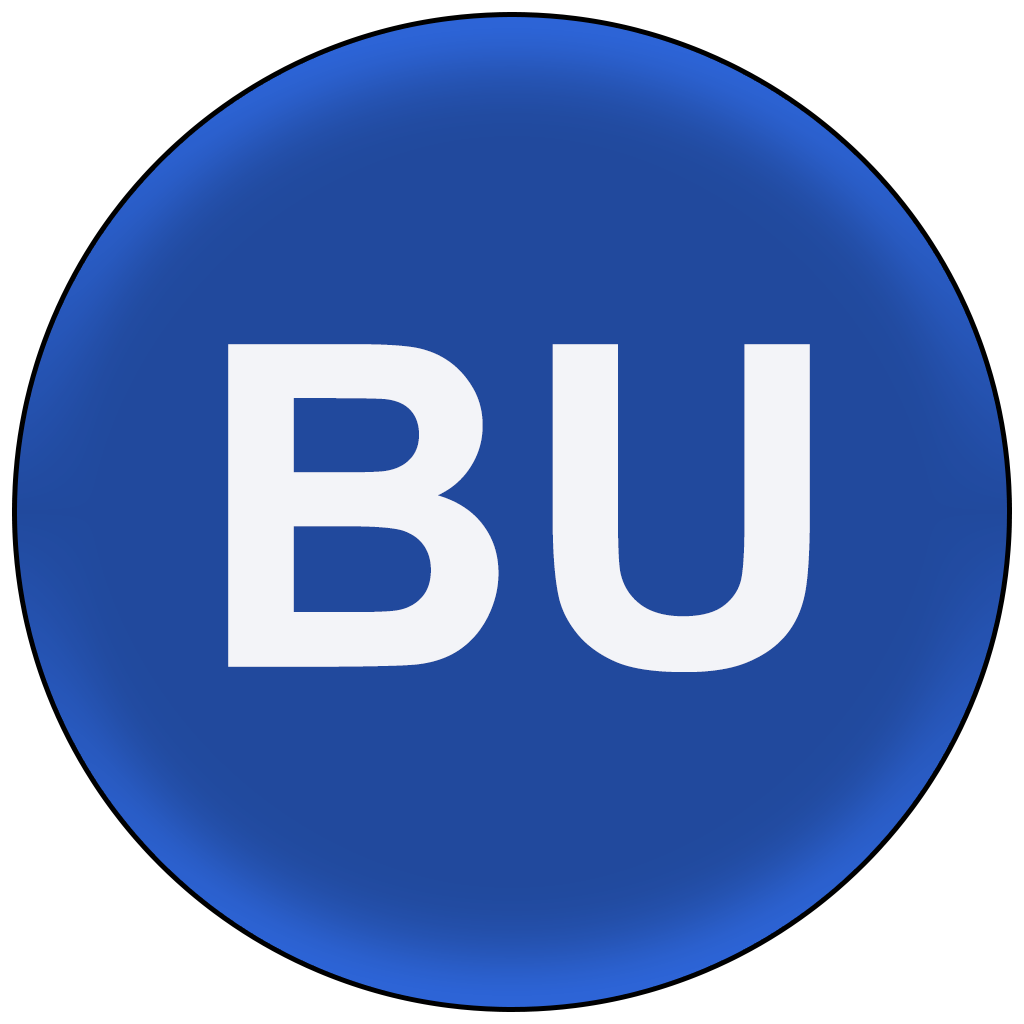
<style>
.page{position:relative;width:1024px;height:1024px;background:#21499d}
.page>*{position:absolute;margin:0}
.t1{font:450px "Arial-BoldMT";color:#f3f4f8}
</style>
<div class="page">
<p class="t1" style="left:228px;top:344px;width:582px;height:328px">BU</p>
</div>
